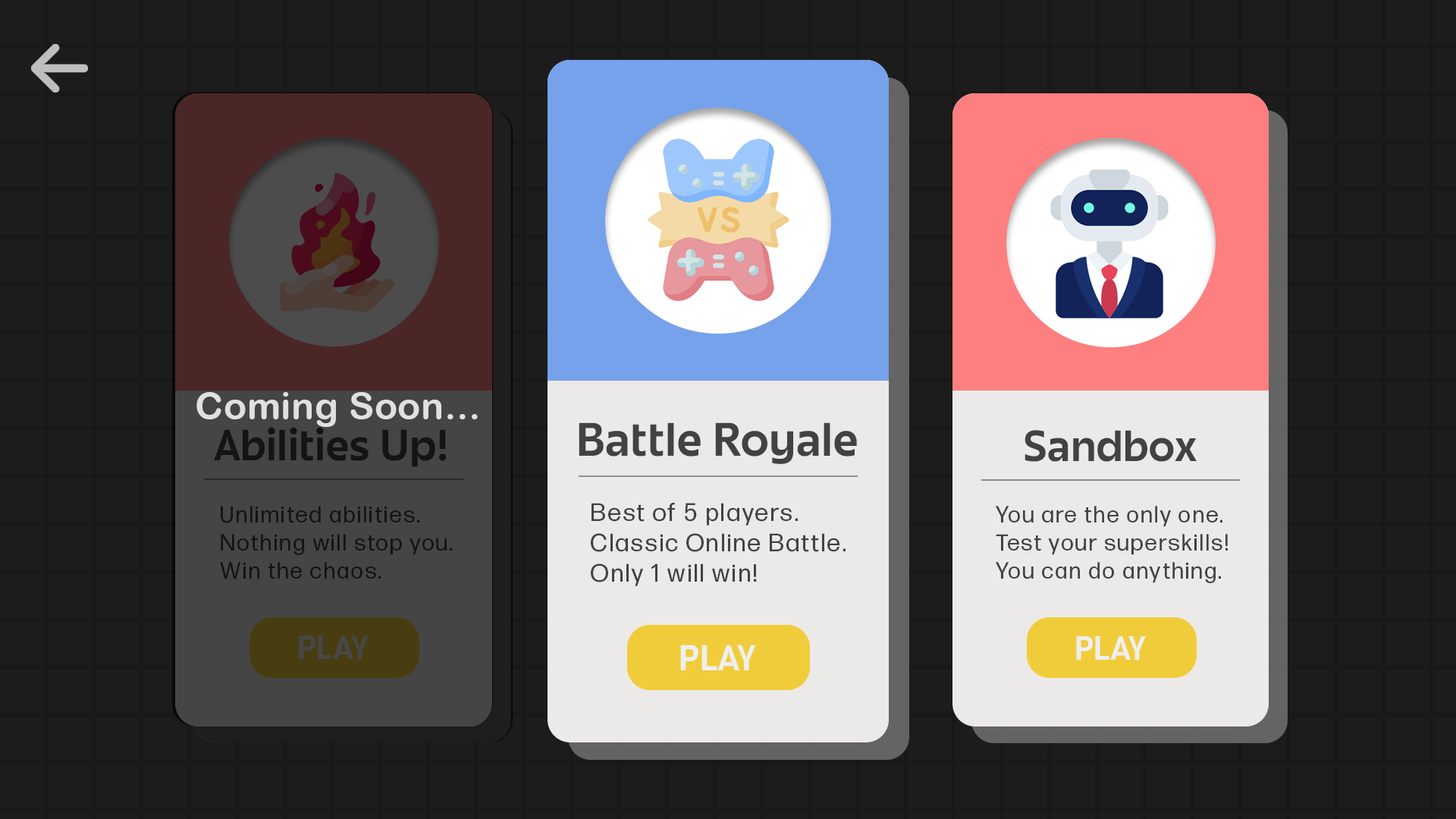
<style>
.page{position:relative;width:1456px;height:819px;background:#1d1c1d}
.page>*{position:absolute;margin:0}
.t1{font:37.9px "ArialRoundedMTBold";letter-spacing:0.01em;color:#e0e0e0}
.t2{font:41.1px "JuneExptVariable-Active";letter-spacing:0.01em;color:#424242}
.t3{font:38.1px "JuneExptVariable-Active";letter-spacing:0.01em;color:#141414}
.t4{font:38.1px "JuneExptVariable-Active";letter-spacing:0.01em;color:#424242}
.t5{font:23.4px "FormaDJRBanner-Regular";letter-spacing:0.1em;color:#141414}
.t6{font:25.3px "FormaDJRBanner-Regular";letter-spacing:0.1em;color:#424242}
.t7{font:23.4px "FormaDJRBanner-Regular";letter-spacing:0.1em;color:#424242}
.t8{font:29.3px "JuneExptVariable-Active";color:#474747}
.t9{font:29.3px "JuneExptVariable-Active";color:#efefef}
.t10{font:31.6px "JuneExptVariable-Active";color:#efefef}
</style>
<div class="page">
<p class="t1" style="left:196px;top:392px;width:282px;height:35px">Coming Soon...</p>
<p class="t2" style="left:579px;top:422px;width:278px;height:42px">Battle Royale</p>
<p class="t3" style="left:214px;top:427px;width:233px;height:40px">Abilities Up!</p>
<p class="t4" style="left:1024px;top:430px;width:173px;height:32px">Sandbox</p>
<p class="t5" style="left:220px;top:506px;width:233px;height:73px">Unlimited abilities.<br>Nothing will stop you.<br>Win the chaos.</p>
<p class="t6" style="left:591px;top:503px;width:255px;height:83px">Best of 5 players.<br>Classic Online Battle.<br>Only 1 will win!</p>
<p class="t7" style="left:996px;top:506px;width:232px;height:77px">You are the only one.<br>Test your superskills!<br>You can do anything.</p>
<p class="t8" style="left:299px;top:635px;width:70px;height:24px">PLAY</p>
<p class="t9" style="left:1076px;top:636px;width:70px;height:24px">PLAY</p>
<p class="t10" style="left:680px;top:645px;width:76px;height:25px">PLAY</p>
</div>
